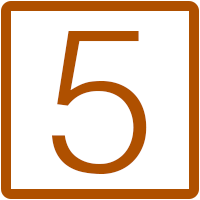
<style>
.page{position:relative;width:200px;height:200px;background:#ffffff}
.page>*{position:absolute;margin:0}
.t1{font:200px "Helvetica-Light";color:#af5000}
</style>
<div class="page">
<p class="t1" style="left:52px;top:31px;width:95px;height:143px">5</p>
</div>
